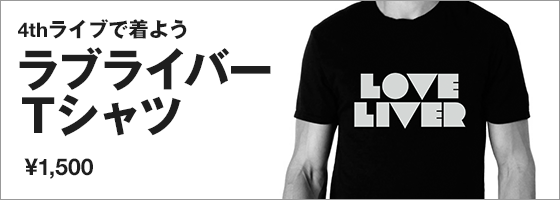
<style>
.page{position:relative;width:560px;height:200px;background:#ffffff}
.page>*{position:absolute;margin:0}
.t1{font:20.1px "GothicMB101Pro-Bold";color:#1e1e1e}
.t2{font:20.1px "HelveticaNeue-Bold";color:#1e1e1e}
.t3{font:45.3px/45.3px "GothicMB101Pro-Bold";letter-spacing:-0.025em;color:#1e1e1e}
.t4{font:23px "HelveticaNeue-Bold";color:#1e1e1e}
</style>
<div class="page">
<p class="t1" style="left:18px;top:19px;width:169px;height:20px"><span class="t2">4th</span>ライブで着よう</p>
<p class="t3" style="left:19px;top:47px;width:252px;height:90px">ラブライバー<br>Tシャツ</p>
<p class="t4" style="left:24px;top:158px;width:69px;height:21px">¥1,500</p>
</div>
